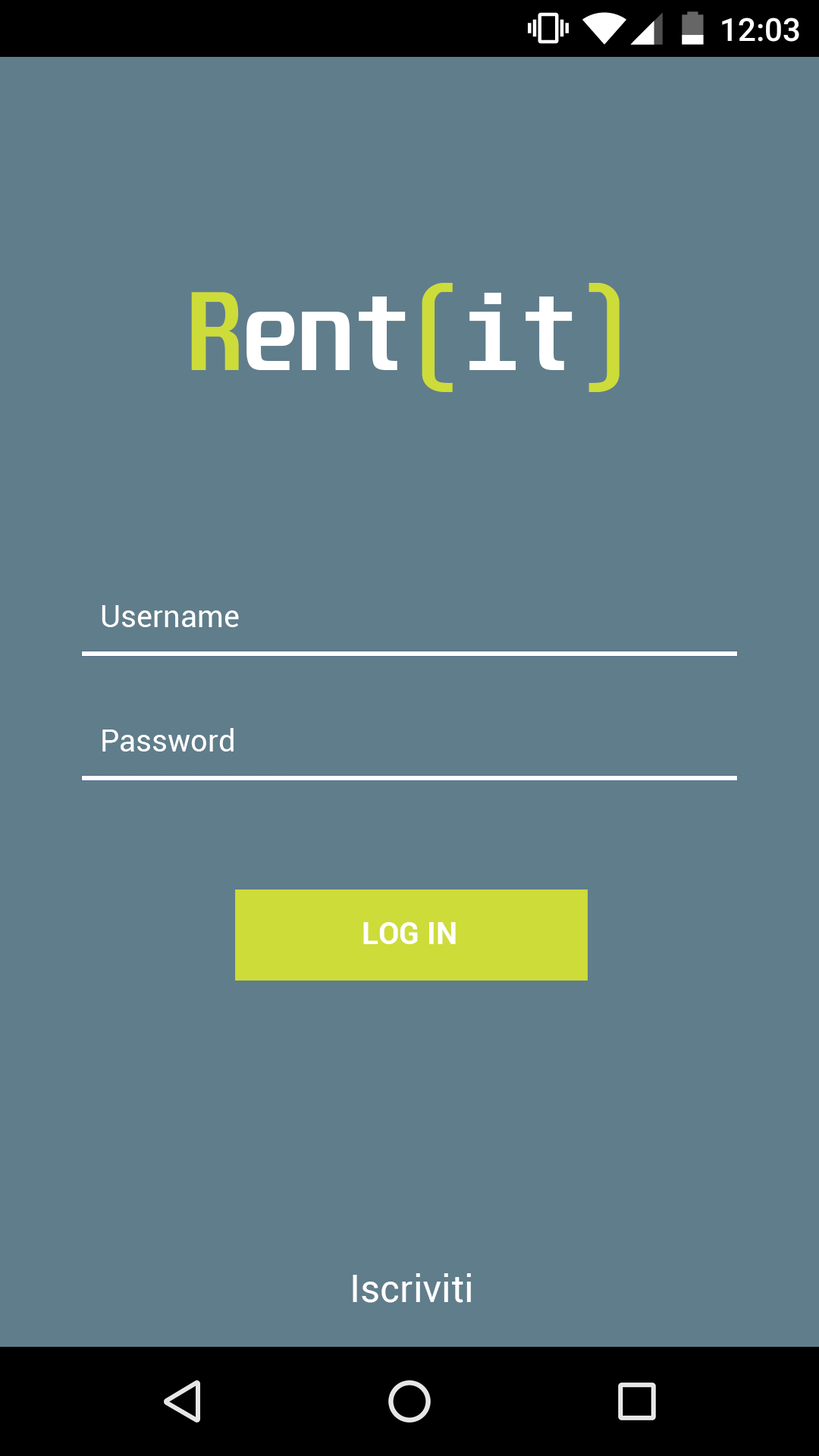
<style>
.page{position:relative;width:819px;height:1456px;background:#607d8b}
.page>*{position:absolute;margin:0}
.t1{font:91px "Unispace-Bold";color:#ffffff}
.t2{font:96.5px "Unispace-Bold";color:#cddc39;scale:0.94 1}
.t3{font:91px "Unispace-Bold";color:#cddc39}
.t4{font:30.3px "Roboto-Regular";color:#ffffff}
.t5{font:30.3px "Roboto-Bold";color:#ffffff}
.t6{font:37.9px "Roboto-Regular";color:#ffffff}
</style>
<div class="page">
<p class="t1" style="left:191px;top:283px;width:429px;height:109px"><span class="t2">R</span>ent<span class="t3">(</span>it<span class="t3">)</span></p>
<p class="t4" style="left:102px;top:605px;width:137px;height:22px">Username</p>
<p class="t4" style="left:102px;top:728px;width:132px;height:23px">Password</p>
<p class="t5" style="left:363px;top:922px;width:93px;height:22px">LOG IN</p>
<p class="t6" style="left:353px;top:1273px;width:118px;height:30px">Iscriviti</p>
</div>
